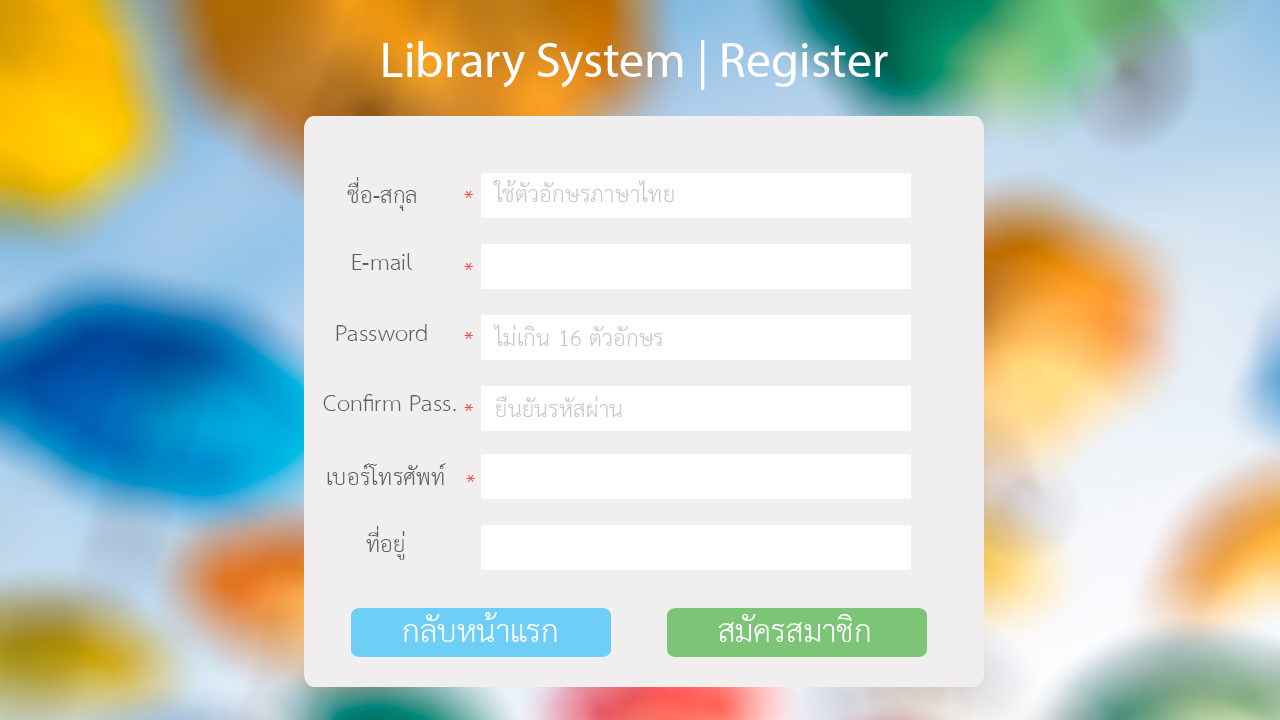
<style>
.page{position:relative;width:1280px;height:720px;background:#f0eeee}
.page>*{position:absolute;margin:0}
.t1{font:50px "MyriadPro-Regular";color:#ffffff}
.t2{font:33.3px "THSarabunPSK";color:#5d5f5d}
.t3{font:33.3px "THSarabunPSK";color:#c9c6c6}
.t4{font:33.3px "THSarabunPSK";color:#f64848}
.t5{font:45.8px "THSarabunPSK";color:#ffffff}
</style>
<div class="page">
<p class="t1" style="left:383px;top:40px;width:505px;height:50px">Library System | Register</p>
<p class="t2" style="left:347px;top:177px;width:69px;height:34px">ช่ื่อ-สกุล</p>
<p class="t3" style="left:493px;top:180px;width:181px;height:22px">ใช้ตัวอักษรภาษาไทย</p>
<p class="t4" style="left:464px;top:191px;width:9px;height:7px">*</p>
<p class="t2" style="left:352px;top:253px;width:60px;height:17px">E-mail</p>
<p class="t4" style="left:464px;top:263px;width:9px;height:7px">*</p>
<p class="t2" style="left:336px;top:324px;width:91px;height:17px">Password</p>
<p class="t3" style="left:493px;top:324px;width:170px;height:22px">ไม่เกิน 16 ตัวอักษร</p>
<p class="t4" style="left:464px;top:332px;width:9px;height:7px">*</p>
<p class="t2" style="left:323px;top:394px;width:133px;height:17px">Confirm Pass.</p>
<p class="t3" style="left:496px;top:396px;width:126px;height:21px">ยืนยันรหัสผ่าน</p>
<p class="t4" style="left:464px;top:404px;width:9px;height:7px">*</p>
<p class="t2" style="left:327px;top:463px;width:119px;height:22px">เบอร์โทรศัพท์</p>
<p class="t4" style="left:466px;top:475px;width:9px;height:7px">*</p>
<p class="t2" style="left:366px;top:526px;width:39px;height:34px">ที่อยู่</p>
<p class="t5" style="left:403px;top:612px;width:154px;height:30px">กลับหน้าแรก</p>
<p class="t5" style="left:719px;top:614px;width:151px;height:28px">สมัครสมาชิก</p>
</div>
